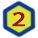
<style>
.page{position:relative;width:38px;height:38px;background:#ffffff}
.page>*{position:absolute;margin:0}
.t1{font:17.3px "AdobeHeitiStd-Regular";color:#b40039;font-weight:bold;scale:1.28 1}
</style>
<div class="page">
<p class="t1" style="left:12px;top:12px;width:13px;height:15px">2</p>
</div>
